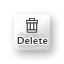
<style>
.page{position:relative;width:64px;height:64px;background:#ffffff}
.page>*{position:absolute;margin:0}
.t1{font:9.8px "AmiraParadiso";letter-spacing:0.05em;color:#424242}
</style>
<div class="page">
<p class="t1" style="left:17px;top:37px;width:31px;height:7px">Delete</p>
</div>
